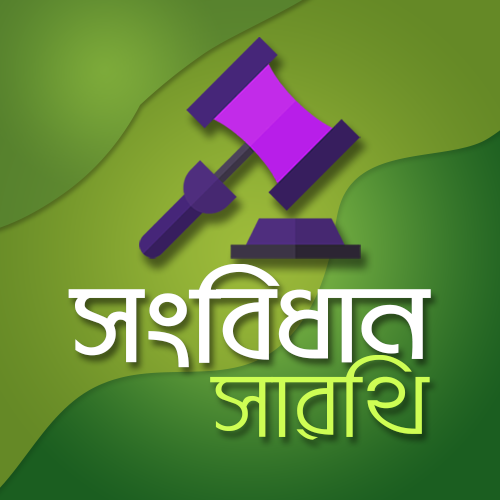
<style>
.page{position:relative;width:500px;height:500px}
.page>*{position:absolute;margin:0}
.t1{font:112.5px "BrahmaputraMJ-Bold";letter-spacing:0.01em;color:#ffffff;scale:1.2 1}
.t2{font:95.8px "BrahmaputraMJ-Regular";letter-spacing:0.01em;color:#cefe54;scale:1.2 1}
</style>
<div class="page">
<p class="t1" style="left:68px;top:264px;width:363px;height:104px">msweavb</p>
<p class="t2" style="left:210px;top:355px;width:220px;height:85px">mviw_</p>
</div>
